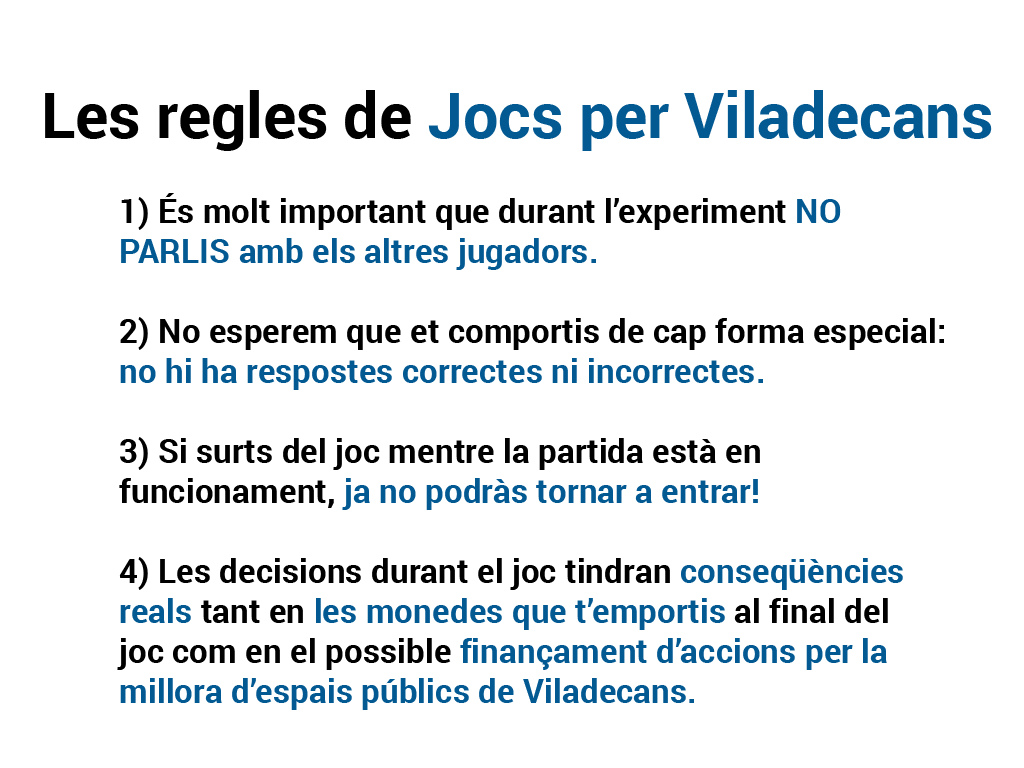
<style>
.page{position:relative;width:1024px;height:768px;background:#ffffff}
.page>*{position:absolute;margin:0}
.t1{font:62.5px "Roboto-Bold";color:#035992}
.t2{font:62.5px "Roboto-Bold";color:#000000}
.t3{font:33.3px "Roboto-Bold";color:#035992}
.t4{font:33.3px "Roboto-Bold";color:#000000}
</style>
<div class="page">
<p class="t1" style="left:45px;top:90px;width:947px;height:61px"><span class="t2">Les regles de </span>Jocs per Viladecans</p>
<p class="t3" style="left:117px;top:193px;width:827px;height:517px"><span class="t4">1) És molt important que durant l’experiment </span>NO <br>PARLIS amb els altres jugadors.<br><span class="t4"><br>2) No esperem que et comportis de cap forma especial: <br></span>no hi ha respostes correctes ni incorrectes.<br><span class="t4"><br>3) Si surts del joc mentre la partida està en <br>funcionament,</span> ja no podràs tornar a entrar!<br><span class="t4"><br>4) Les decisions durant el joc tindran </span>conseqüències <br>reals<span class="t4"> tant en </span>les monedes que t’emportis<span class="t4"> al final del <br>joc com en el possible </span>finançament d’accions per la <br>millora d’espais públics de Viladecans.</p>
</div>
